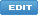
<style>
.page{position:relative;width:38px;height:15px}
.page>*{position:absolute;margin:0}
.t1{font:8px "Hooge0553";color:#ffffff;text-transform:uppercase;font-weight:bold}
</style>
<div class="page">
<p class="t1" style="left:9px;top:5px;width:23px;height:5px">EDIT</p>
</div>
